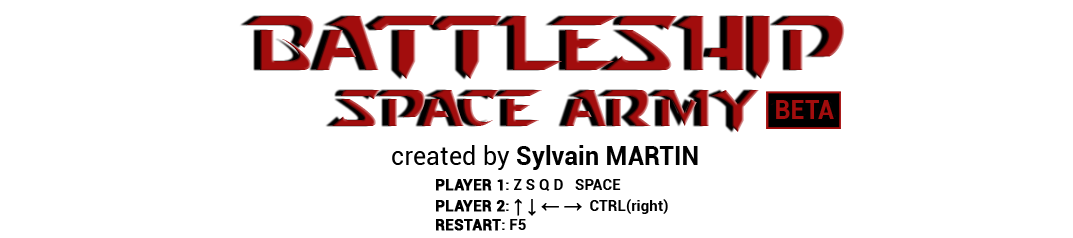
<style>
.page{position:relative;width:1073px;height:238px;background:#ffffff}
.page>*{position:absolute;margin:0}
.t1{font:76.2px "StarcraftNormal";color:#a20d0d}
.t2{font:50.8px "StarcraftNormal";color:#a20d0d}
.t3{font:25.4px "Roboto-Bold";color:#a20d0d}
.t4{font:25.4px "Roboto-Bold";color:#010101}
.t5{font:25.4px "Roboto-Regular";color:#010101}
.t6{font:15.2px "Roboto-Bold";color:#000000}
.t7{font:15.2px "Roboto-Bold";color:#000000;font-weight:bold}
.t8{font:17.8px "TimesNewRomanPSMT";color:#000000;font-weight:bold}
</style>
<div class="page">
<p class="t1" style="left:246px;top:16px;width:599px;height:63px">BATTLESHIP</p>
<p class="t2" style="left:332px;top:90px;width:427px;height:42px">Space Army</p>
<p class="t3" style="left:776px;top:100px;width:58px;height:19px">BETA</p>
<p class="t4" style="left:392px;top:145px;width:306px;height:25px"><span class="t5">created by </span>Sylvain MARTIN</p>
<p class="t6" style="left:436px;top:179px;width:232px;height:52px"><span class="t7">PLAYER 1</span>: Z S Q D   SPACE<br><span class="t7">PLAYER 2</span>: <span class="t8">↑ ↓ ← →</span>  CTRL(right)<br><span class="t7">RESTART</span>: F5</p>
</div>
